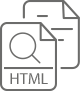
<style>
.page{position:relative;width:80px;height:91px;background:#ffffff}
.page>*{position:absolute;margin:0}
.t1{font:16px "MyriadPro-Regular";color:#6c6c6b}
</style>
<div class="page">
<p class="t1" style="left:10px;top:73px;width:38px;height:11px">HTML</p>
</div>
